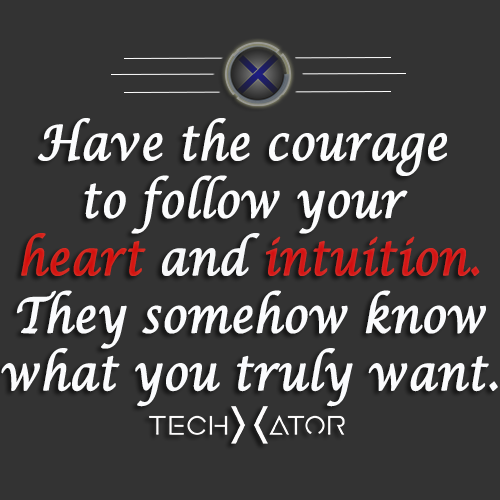
<style>
.page{position:relative;width:500px;height:500px;background:#333333}
.page>*{position:absolute;margin:0}
.t1{font:47.9px "LucidaCalligraphy-Italic";color:#fafbfd;font-weight:bold;scale:0.87 1}
.t2{font:47.9px "LucidaCalligraphy-Italic";color:#fbfcfd;font-weight:bold;scale:0.87 1}
.t3{font:47.9px "LucidaCalligraphy-Italic";color:#d00707;font-weight:bold;scale:0.87 1}
.t4{font:47.9px "LucidaCalligraphy-Italic";color:#f6f7f9;font-weight:bold;scale:0.87 1}
.t5{font:47.9px "LucidaCalligraphy-Italic";color:#d0070b;font-weight:bold;scale:0.87 1}
</style>
<div class="page">
<p class="t1" style="left:1px;top:118px;width:497px;height:289px;text-align:center"><span class="t2">Have the courage <br>to follow your <br></span><span class="t3">heart </span><span class="t4">and </span><span class="t5">intuition.<br></span>They somehow know<br>what you truly want.</p>
</div>
